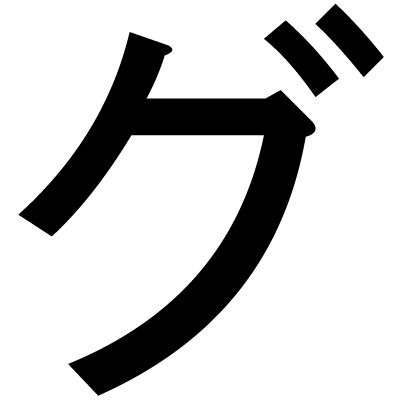
<style>
.page{position:relative;width:400px;height:400px;background:#ffffff}
.page>*{position:absolute;margin:0}
.t1{font:424.8px "MS-PGothic";color:#000000}
</style>
<div class="page">
<p class="t1" style="left:18px;top:3px;width:366px;height:393px">グ</p>
</div>
